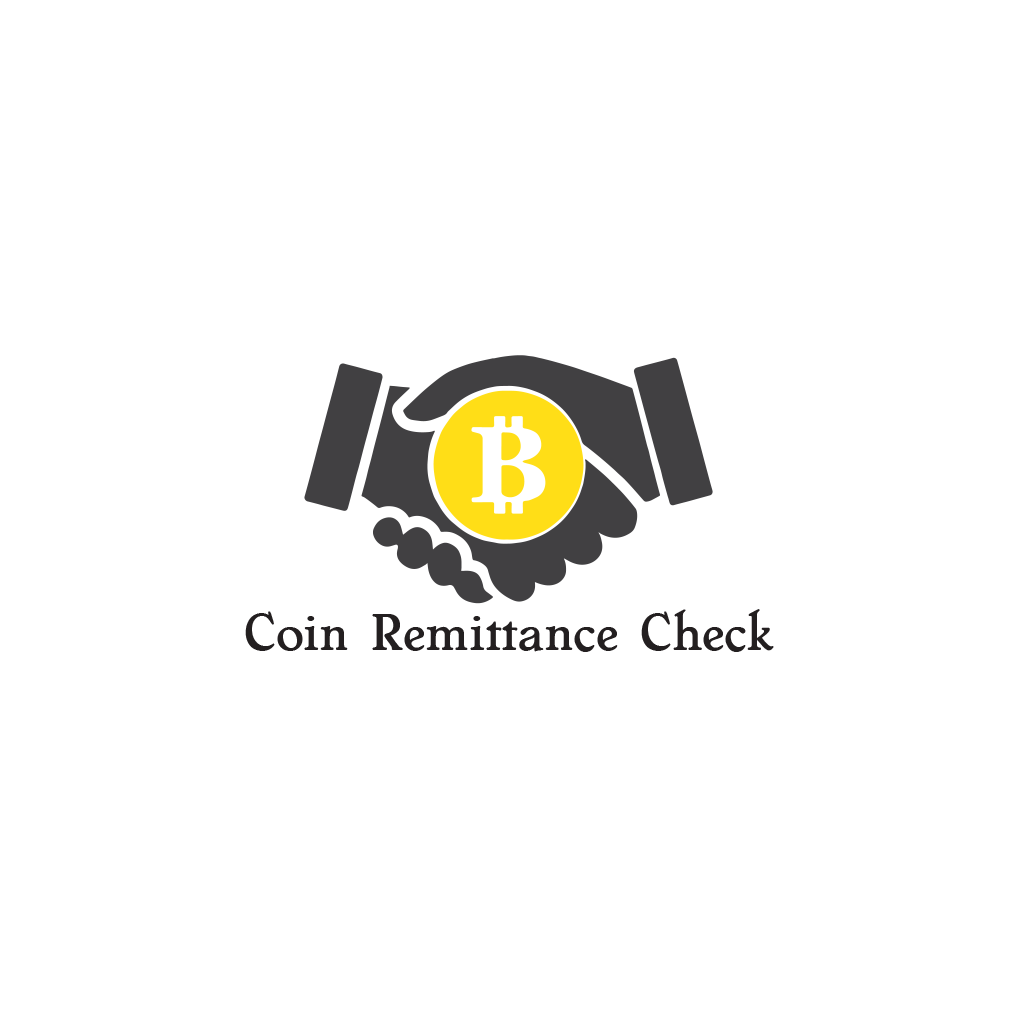
<style>
.page{position:relative;width:1018px;height:1018px;background:#ffffff}
.page>*{position:absolute;margin:0}
.t1{font:52.7px "Chelsea";color:#231f20}
</style>
<div class="page">
<p class="t1" style="left:245px;top:609px;width:529px;height:43px">Coin Remittance Check</p>
</div>
